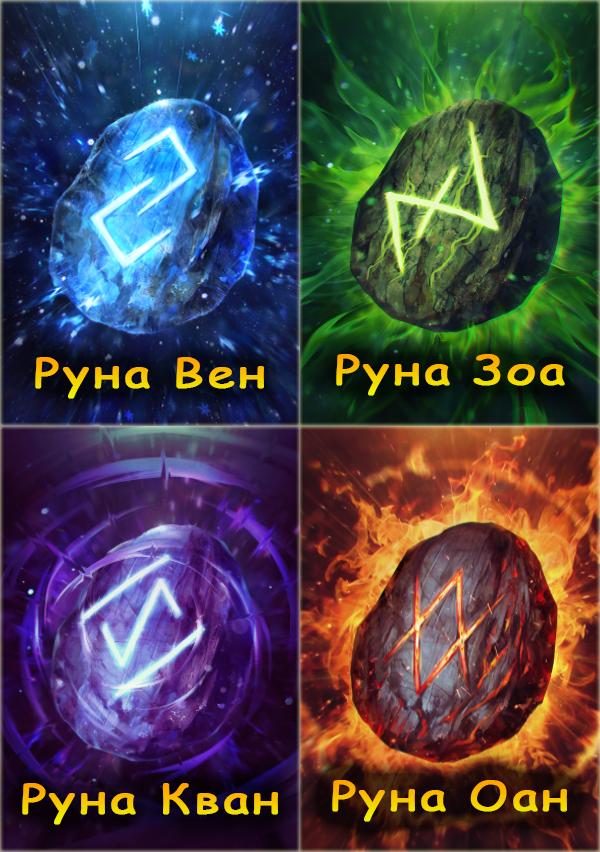
<style>
.page{position:relative;width:600px;height:852px}
.page>*{position:absolute;margin:0}
.t1{font:40px "ComicSansMS";letter-spacing:0.06em;font-weight:bold;scale:1.22 1}
.t2{font:40px "ComicSansMS";letter-spacing:0.06em;color:#f7c801;font-weight:bold;scale:1.22 1}
</style>
<div class="page">
<p class="t1" style="left:35px;top:357px;width:229px;height:42px">Руна Вен</p>
<p class="t1" style="left:336px;top:354px;width:229px;height:42px">Руна Зоа</p>
<p class="t2" style="left:22px;top:783px;width:256px;height:42px">Руна Кван</p>
<p class="t1" style="left:332px;top:780px;width:235px;height:42px">Руна Оан</p>
</div>
